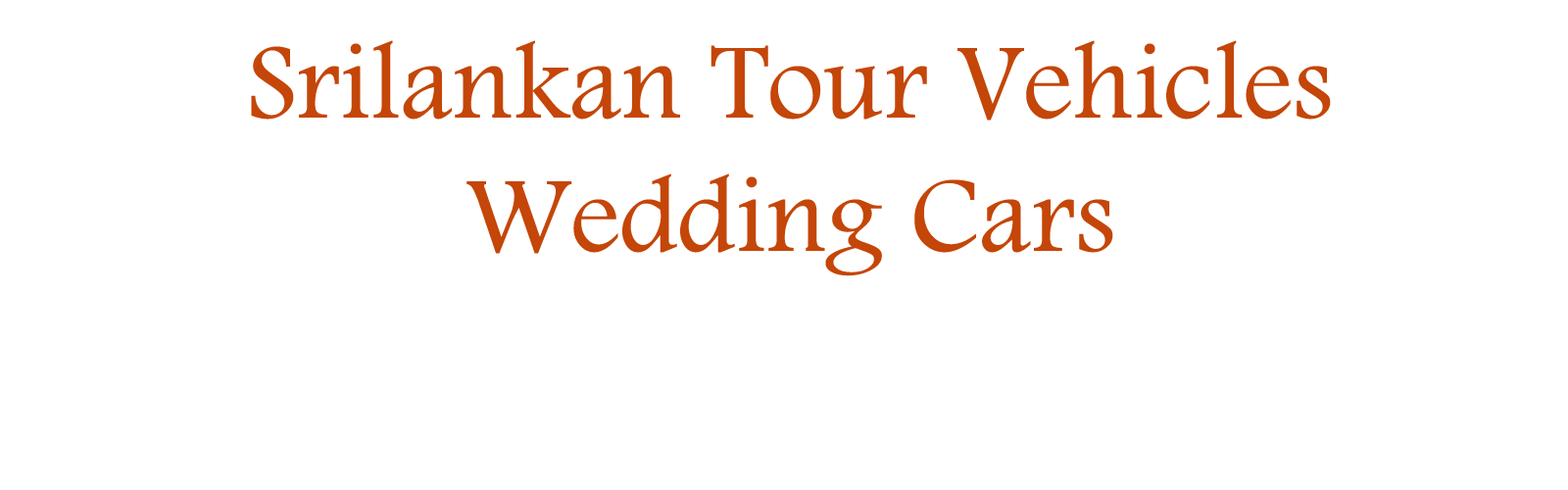
<style>
.page{position:relative;width:1568px;height:490px;background:#ffffff}
.page>*{position:absolute;margin:0}
.t1{font:111.1px "FootlightMTLight";color:#c44608}
</style>
<div class="page">
<p class="t1" style="left:251px;top:40px;width:1080px;height:236px;text-align:center">Srilankan Tour Vehicles<br>Wedding Cars</p>
</div>
